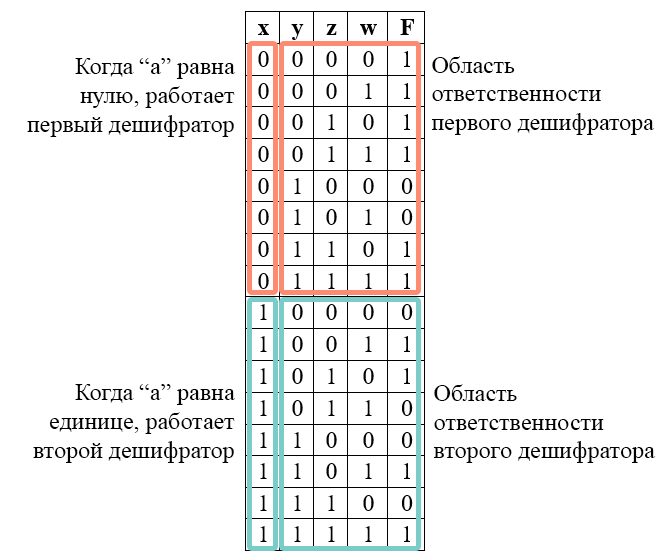
<style>
.page{position:relative;width:660px;height:560px;background:#ffffff}
.page>*{position:absolute;margin:0}
.t1{font:24px "TimesNewRomanPSMT";color:#000000}
</style>
<div class="page">
<p class="t1" style="left:27px;top:58px;width:209px;height:79px;text-align:right">Когда “а” равна<br>нулю, работает<br>первый дешифратор</p>
<p class="t1" style="left:431px;top:56px;width:224px;height:79px">Область <br>ответственности<br>первого дешифратора</p>
<p class="t1" style="left:33px;top:384px;width:203px;height:79px;text-align:right">Когда “a” равна<br>единице, работает<br>второй дешифратор</p>
<p class="t1" style="left:433px;top:384px;width:223px;height:79px">Область <br>ответственности<br>второго дешифратора</p>
</div>
